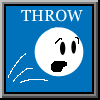
<style>
.page{position:relative;width:100px;height:100px;background:#0072bc}
.page>*{position:absolute;margin:0}
.t1{font:16px "Georgia";color:#ffffff}
</style>
<div class="page">
<p class="t1" style="left:21px;top:9px;width:62px;height:13px">THROW</p>
</div>
